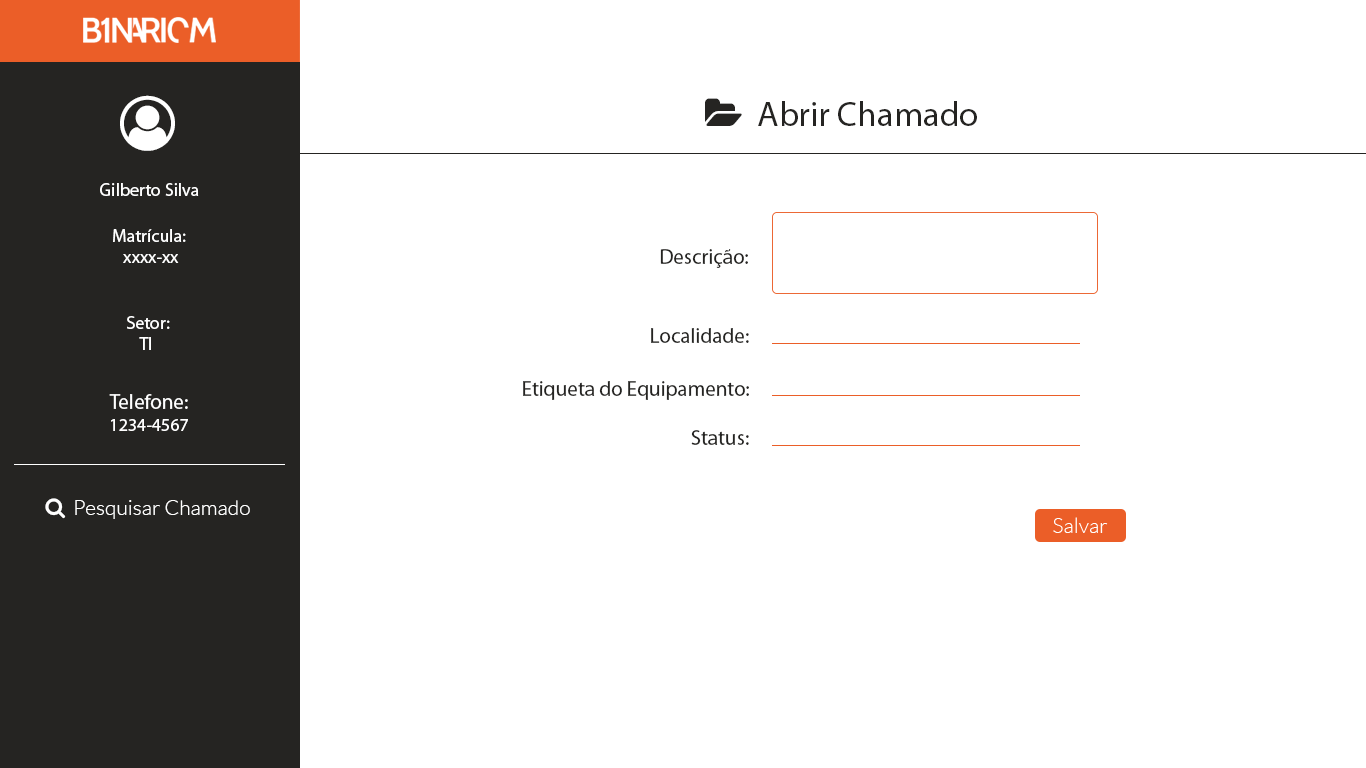
<style>
.page{position:relative;width:1366px;height:768px;background:#ffffff}
.page>*{position:absolute;margin:0}
.t1{font:18px "MyriadPro-Regular";color:#ffffff}
.t2{font:21px "MyriadPro-Regular";color:#252422}
.t3{font:21px "MyriadPro-Regular";color:#ffffff}
</style>
<div class="page">
<p class="t1" style="left:100px;top:183px;width:99px;height:13px">Gilberto Silva</p>
<p class="t1" style="left:113px;top:229px;width:73px;height:34px;text-align:center">Matrícula: <br>xxxx-xx</p>
<p class="t2" style="left:660px;top:249px;width:88px;height:19px">Descrição:</p>
<p class="t1" style="left:127px;top:316px;width:43px;height:34px;text-align:center">Setor:<br>TI</p>
<p class="t2" style="left:651px;top:328px;width:98px;height:15px">Localidade:</p>
<p class="t2" style="left:523px;top:381px;width:226px;height:19px">Etiqueta do Equipamento:</p>
<p class="t3" style="left:109px;top:394px;width:79px;height:37px;text-align:center">Telefone:<br><span class="t1">1234-4567</span></p>
<p class="t2" style="left:691px;top:430px;width:58px;height:15px">Status:</p>
</div>
